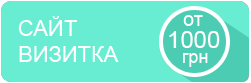
<style>
.page{position:relative;width:251px;height:83px;background:#68edd2}
.page>*{position:absolute;margin:0}
.t1{font:22px "ArialMT";color:#ffffff}
.t2{font:20px "ArialMT";color:#ffffff}
.t3{font:24px "ArialMT";color:#ffffff}
.t4{font:18px "ArialMT";color:#ffffff}
</style>
<div class="page">
<p class="t1" style="left:18px;top:16px;width:101px;height:46px">САЙТ<br>ВИЗИТКА</p>
<p class="t2" style="left:183px;top:15px;width:20px;height:11px">от</p>
<p class="t3" style="left:169px;top:31px;width:51px;height:17px">1000</p>
<p class="t4" style="left:183px;top:53px;width:25px;height:14px">грн</p>
</div>
